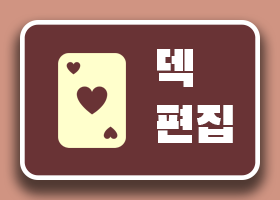
<style>
.page{position:relative;width:280px;height:200px;background:#693335}
.page>*{position:absolute;margin:0}
.t1{font:12px/55.7px "BlackHanSans-Regular";color:#ffffff}
</style>
<div class="page">
<p class="t1" style="left:157px;top:49px;width:76px;height:94px">덱<br>편집</p>
</div>
